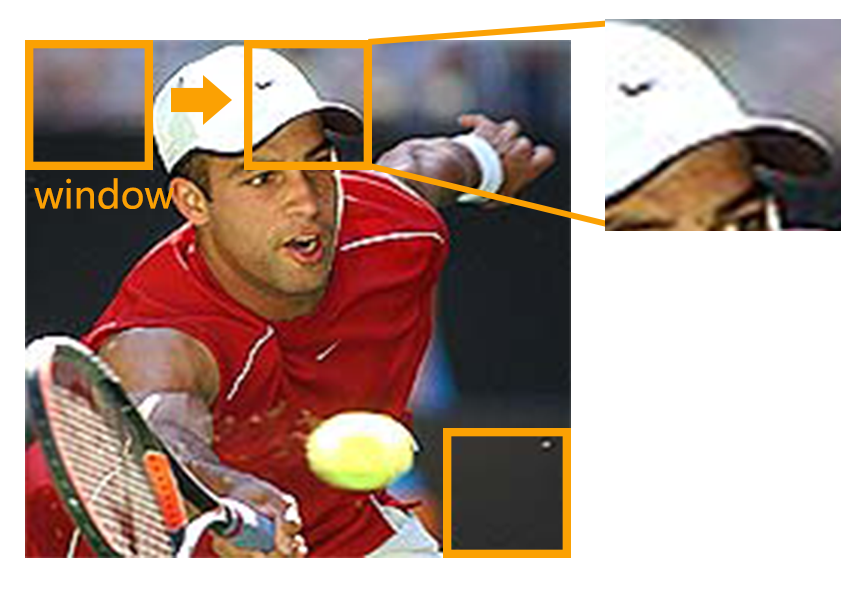
<style>
.page{position:relative;width:863px;height:591px;background:#ffffff}
.page>*{position:absolute;margin:0}
.t1{font:37.5px "MicrosoftYaHei";color:#fba103}
</style>
<div class="page">
<p class="t1" style="left:34px;top:178px;width:140px;height:31px">window</p>
</div>
